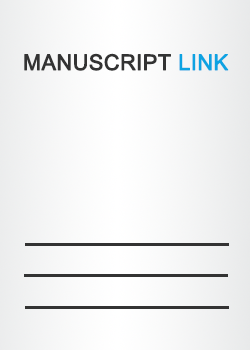
<style>
.page{position:relative;width:250px;height:350px}
.page>*{position:absolute;margin:0}
.t1{font:21.6px "ArialUnicodeMS";color:#333333;font-weight:bold}
.t2{font:21.6px "ArialUnicodeMS";color:#0da3e2;font-weight:bold}
</style>
<div class="page">
<p class="t1" style="left:24px;top:53px;width:205px;height:18px">MANUSCRIPT <span class="t2">LINK</span></p>
</div>
